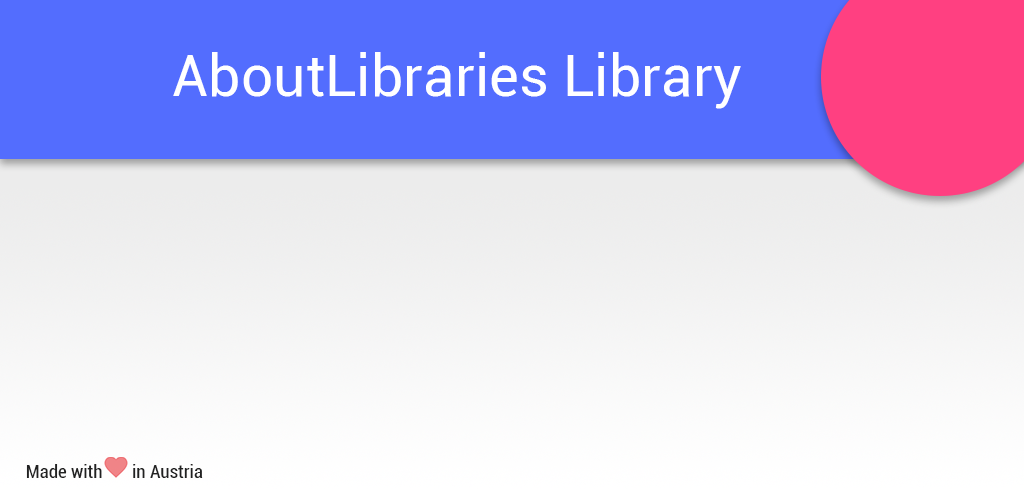
<style>
.page{position:relative;width:1024px;height:500px;background:#536dfe}
.page>*{position:absolute;margin:0}
.t1{font:57.1px "Roboto-Regular";color:#ffffff}
.t2{font:19.1px "Roboto-Condensed";color:#212121}
</style>
<div class="page">
<p class="t1" style="left:173px;top:52px;width:568px;height:57px">AboutLibraries Library</p>
<p class="t2" style="left:26px;top:464px;width:177px;height:14px">Made with       in Austria</p>
</div>
